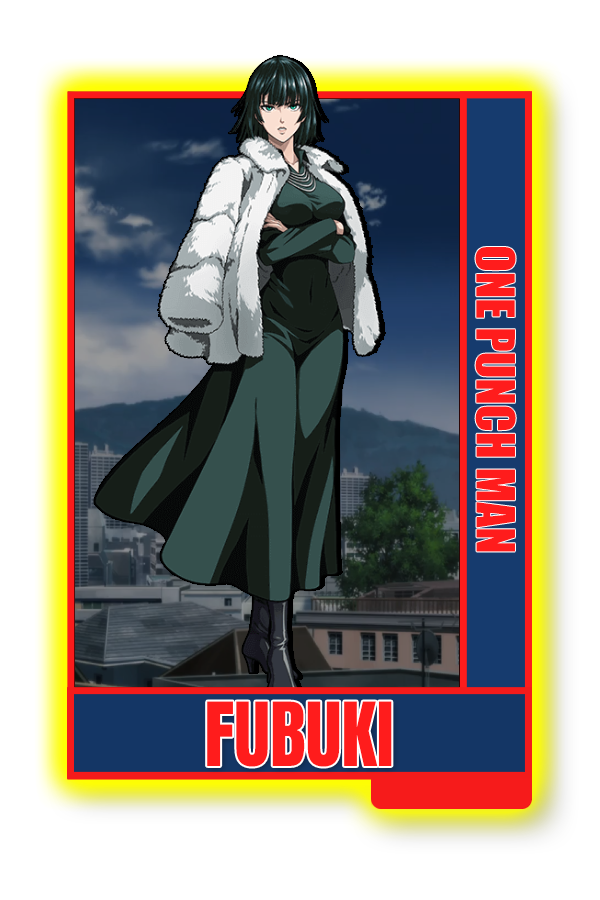
<style>
.page{position:relative;width:600px;height:900px;background:#ffffff}
.page>*{position:absolute;margin:0}
.t1{font:48.8px "Impact";color:#ff1c1c}
.t2{font:75px "Impact";color:#ff1c1c}
</style>
<div class="page">
<p class="t1" style="left:475px;top:246px;width:41px;height:306px;rotate:90deg">ONE PUNCH MAN</p>
<p class="t2" style="left:207px;top:701px;width:185px;height:66px">FUBUKI</p>
</div>
